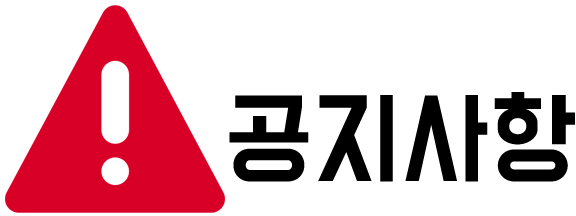
<style>
.page{position:relative;width:576px;height:216px;background:#ffffff}
.page>*{position:absolute;margin:0}
.t1{font:91.4px "BMDoHyeon";color:#000000}
</style>
<div class="page">
<p class="t1" style="left:229px;top:92px;width:346px;height:90px">공지사항</p>
</div>
